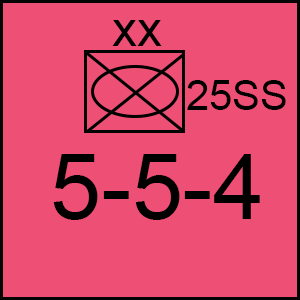
<style>
.page{position:relative;width:300px;height:300px;background:#ee4f74}
.page>*{position:absolute;margin:0}
.t1{font:50px "ArialMT";color:#000000}
.t2{font:41.7px "ArialMT";color:#000000}
.t3{font:91.7px "ArialMT";color:#000000}
</style>
<div class="page">
<p class="t1" style="left:112px;top:20px;width:50px;height:26px">xx</p>
<p class="t2" style="left:187px;top:80px;width:99px;height:30px">25SS</p>
<p class="t3" style="left:53px;top:154px;width:207px;height:66px">5-5-4</p>
</div>
